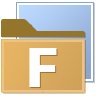
<style>
.page{position:relative;width:96px;height:96px}
.page>*{position:absolute;margin:0}
.t1{font:56px "SegoeUI-Bold";color:#fefeff;scale:1.2 1}
</style>
<div class="page">
<p class="t1" style="left:29px;top:48px;width:28px;height:39px">F</p>
</div>
